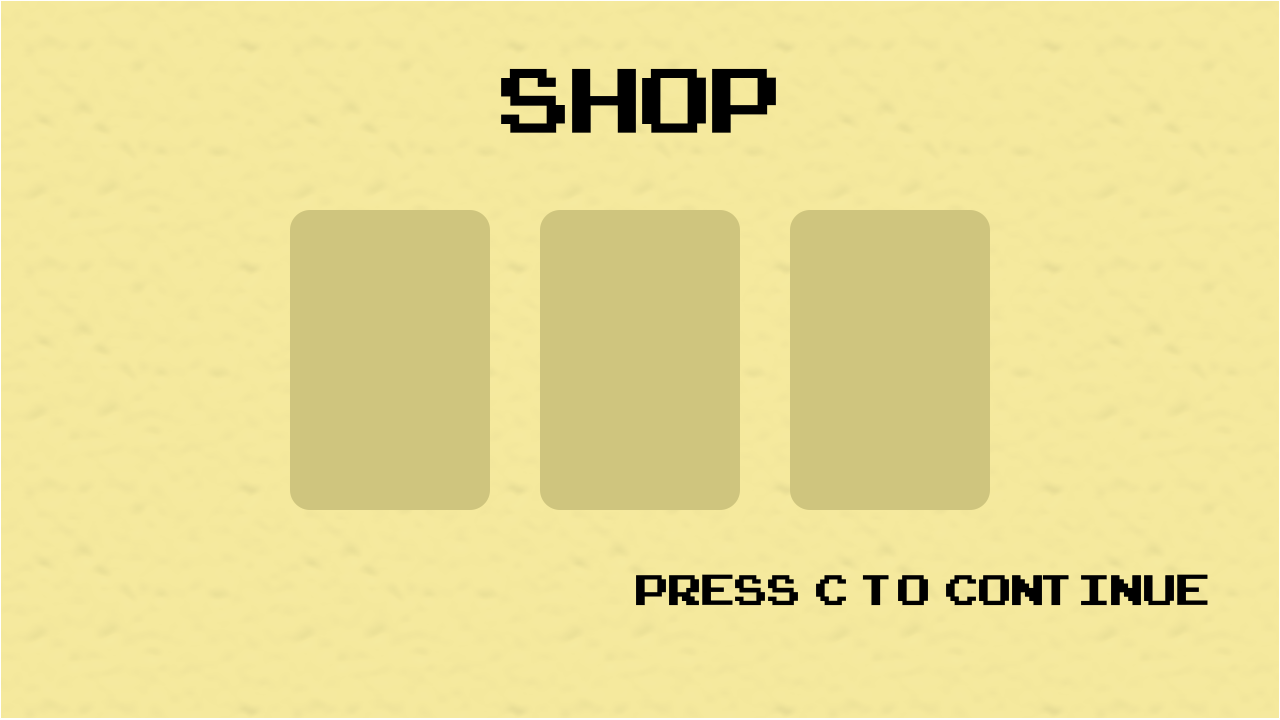
<style>
.page{position:relative;width:1280px;height:720px;background:#f5e99d}
.page>*{position:absolute;margin:0}
.t1{font:128px "ArcadeClassic";color:#000000}
.t2{font:60px "ArcadeClassic";color:#000000}
</style>
<div class="page">
<p class="t1" style="left:501px;top:68px;width:275px;height:65px">SHOP</p>
<p class="t2" style="left:636px;top:574px;width:572px;height:32px">Press  c  to  continue</p>
</div>
